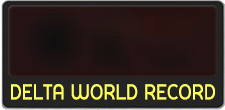
<style>
.page{position:relative;width:225px;height:110px}
.page>*{position:absolute;margin:0}
.t1{font:21.6px "ELURERegular";color:#ffff54;text-transform:uppercase;scale:0.9 1}
</style>
<div class="page">
<p class="t1" style="left:11px;top:84px;width:204px;height:16px">Delta world Record</p>
</div>
